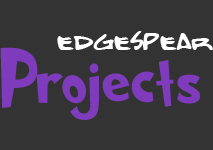
<style>
.page{position:relative;width:213px;height:150px;background:#333333}
.page>*{position:absolute;margin:0}
.t1{font:42px "Bobcat";color:#ffffff}
.t2{font:72px "Grinched2.0";color:#7e3bbc}
</style>
<div class="page">
<p class="t1" style="left:57px;top:31px;width:156px;height:19px">edgespear</p>
<p class="t2" style="left:0px;top:47px;width:201px;height:73px">Projects</p>
</div>
